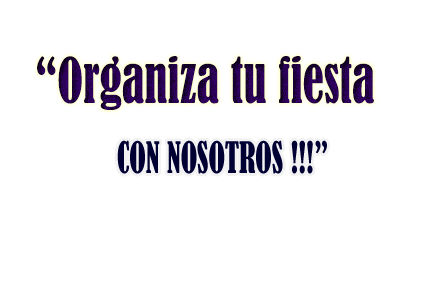
<style>
.page{position:relative;width:425px;height:284px;background:#ffffff}
.page>*{position:absolute;margin:0}
.t1{font:58.1px "BernardMT-Condensed";scale:0.81 1}
.t2{font:40.2px "BernardMT-Condensed";color:#000033;scale:0.75 1}
</style>
<div class="page">
<p class="t1" style="left:37px;top:56px;width:337px;height:54px">“Organiza tu fiesta</p>
<p class="t2" style="left:117px;top:140px;width:210px;height:34px">CON NOSOTROS !!!”</p>
</div>
